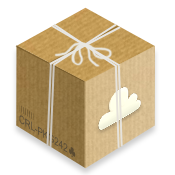
<style>
.page{position:relative;width:175px;height:175px;background:#ffffff}
.page>*{position:absolute;margin:0}
.t1{font:11px "ArialMT";color:#584d38;scale:0.85 1}
</style>
<div class="page">
<p class="t1" style="left:19px;top:115px;width:49px;height:38px;rotate:32deg">CRL-PKG242</p>
</div>
